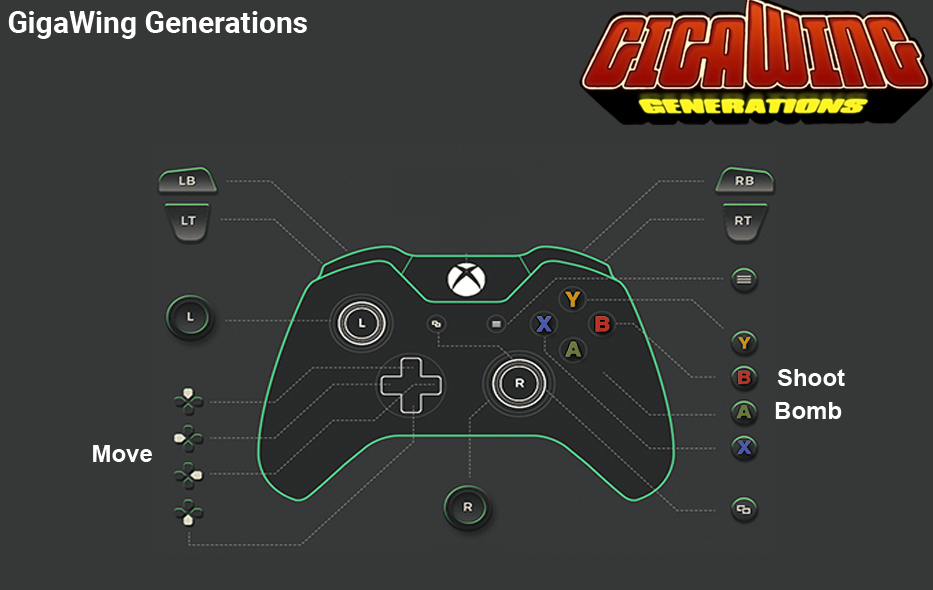
<style>
.page{position:relative;width:933px;height:590px;background:#363838}
.page>*{position:absolute;margin:0}
.t1{font:30px "Roboto-Bold";color:#ffffff}
.t2{font:24px "Arial-BoldMT";color:#fefefe}
</style>
<div class="page">
<p class="t1" style="left:8px;top:11px;width:299px;height:28px">GigaWing Generations</p>
<p class="t2" style="left:777px;top:369px;width:68px;height:17px">Shoot</p>
<p class="t2" style="left:775px;top:402px;width:67px;height:17px">Bomb</p>
<p class="t2" style="left:93px;top:445px;width:59px;height:17px">Move</p>
</div>
